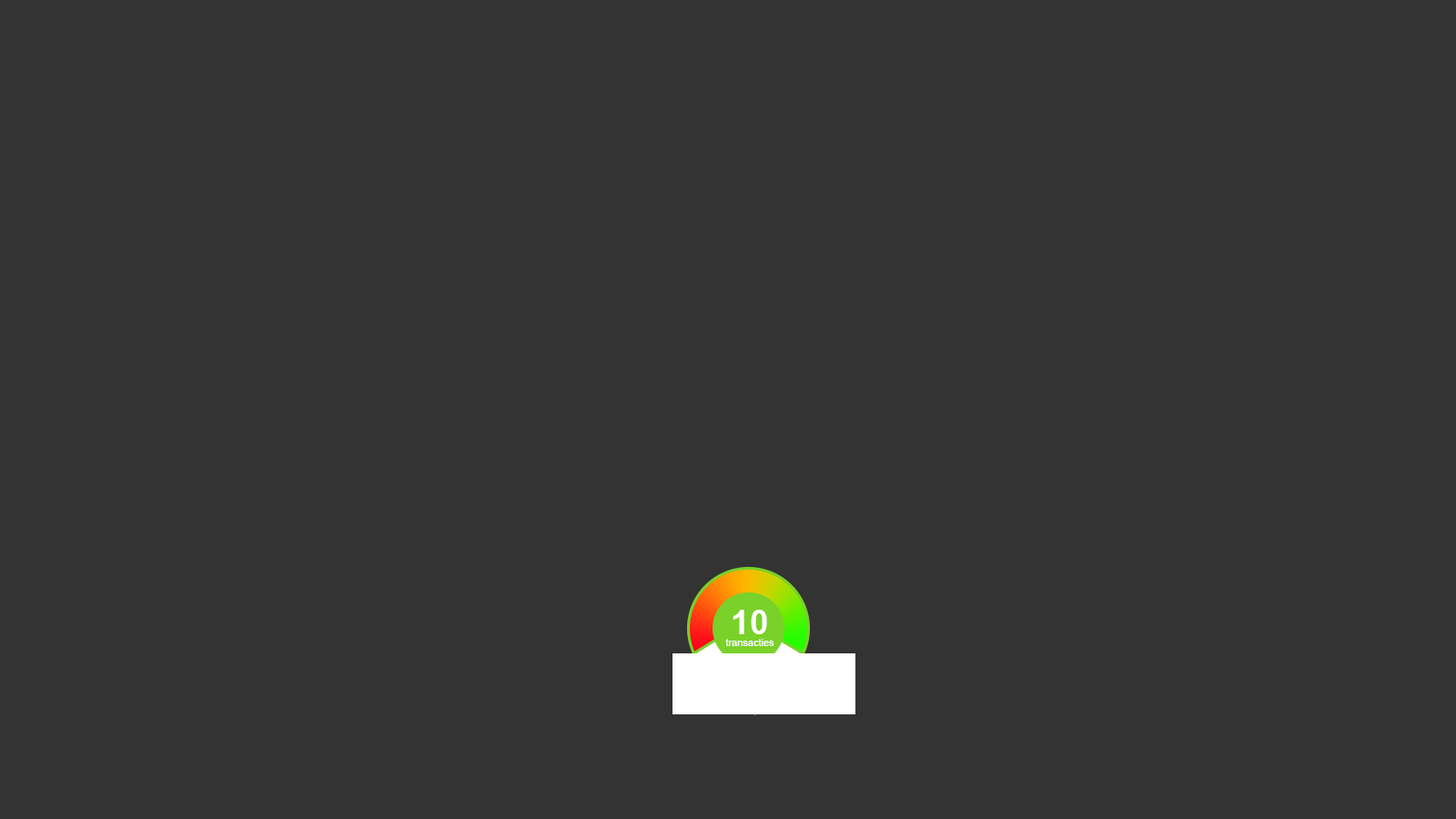
<style>
.page{position:relative;width:1456px;height:819px;background:#333333}
.page>*{position:absolute;margin:0}
.t1{font:10px "ArialMT";color:#ffffff}
.t2{font:33.7px "Arial-BoldMT";color:#ffffff}
</style>
<div class="page">
<p class="t1" style="left:725px;top:610px;width:49px;height:36px;text-align:center"><span class="t2">10<br></span>transacties</p>
</div>
